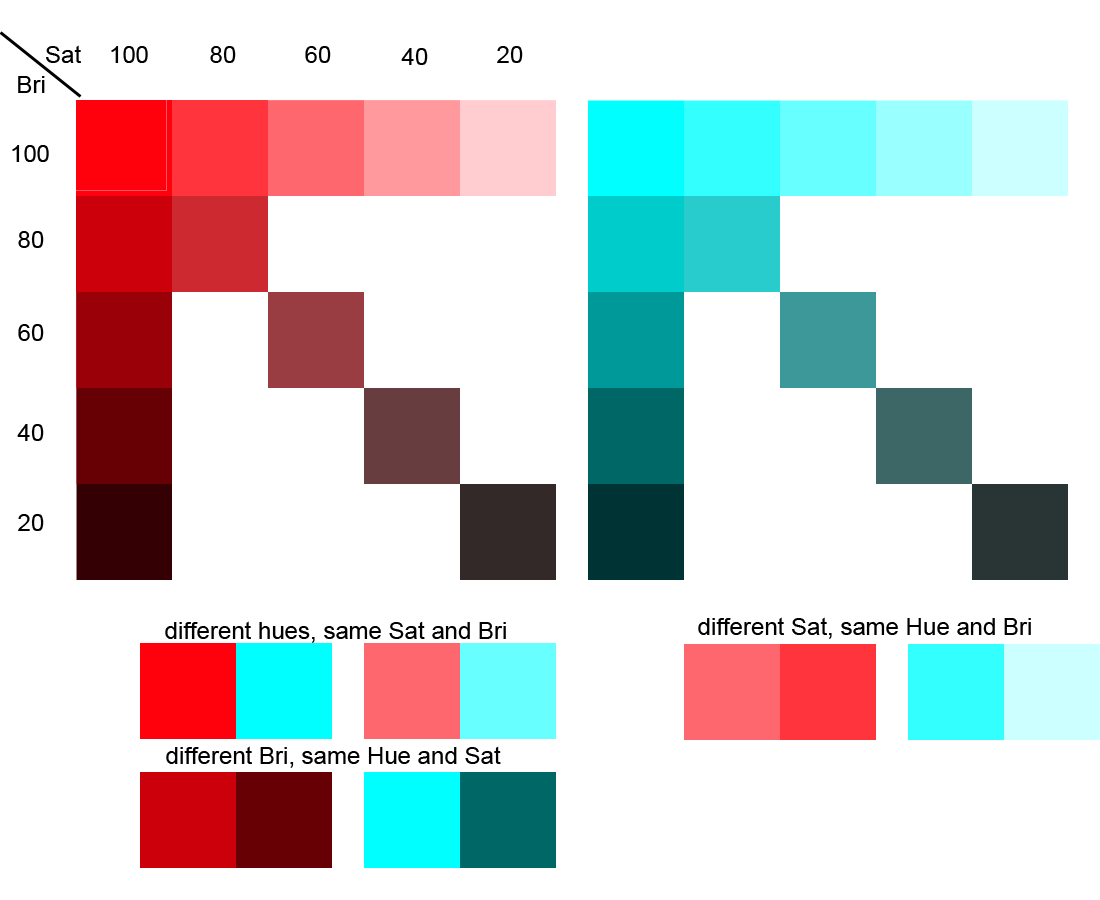
<style>
.page{position:relative;width:1100px;height:900px;background:#ffffff}
.page>*{position:absolute;margin:0}
.t1{font:24px "ArialMT";color:#000000}
</style>
<div class="page">
<p class="t1" style="left:46px;top:45px;width:35px;height:18px">Sat</p>
<p class="t1" style="left:111px;top:46px;width:37px;height:17px">100</p>
<p class="t1" style="left:210px;top:46px;width:26px;height:17px">80</p>
<p class="t1" style="left:305px;top:46px;width:26px;height:17px">60</p>
<p class="t1" style="left:401px;top:48px;width:27px;height:17px">40</p>
<p class="t1" style="left:497px;top:46px;width:26px;height:17px">20</p>
<p class="t1" style="left:18px;top:76px;width:27px;height:17px">Bri</p>
<p class="t1" style="left:12px;top:145px;width:37px;height:17px">100</p>
<p class="t1" style="left:18px;top:231px;width:26px;height:17px">80</p>
<p class="t1" style="left:18px;top:324px;width:26px;height:17px">60</p>
<p class="t1" style="left:17px;top:424px;width:27px;height:17px">40</p>
<p class="t1" style="left:18px;top:514px;width:26px;height:17px">20</p>
<p class="t1" style="left:698px;top:617px;width:333px;height:22px">different Sat, same Hue and Bri</p>
<p class="t1" style="left:165px;top:621px;width:341px;height:22px">different hues, same Sat and Bri</p>
<p class="t1" style="left:166px;top:746px;width:335px;height:22px">different Bri, same Hue and Sat</p>
</div>
